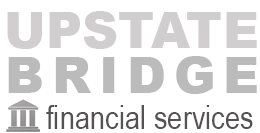
<style>
.page{position:relative;width:260px;height:133px;background:#ffffff}
.page>*{position:absolute;margin:0}
.t1{font:50px "Arial-Black";color:#d0cece}
.t2{font:33.3px "ArialNarrow";color:#545252}
</style>
<div class="page">
<p class="t1" style="left:7px;top:11px;width:250px;height:38px">UPSTATE</p>
<p class="t2" style="left:46px;top:105px;width:207px;height:24px">financial services</p>
</div>
